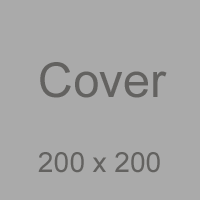
<style>
.page{position:relative;width:200px;height:200px;background:#aaaaaa}
.page>*{position:absolute;margin:0}
.t1{font:48px "ArialMT";color:#636260}
.t2{font:28px "ArialMT";color:#636260}
</style>
<div class="page">
<p class="t1" style="left:40px;top:62px;width:127px;height:36px">Cover</p>
<p class="t2" style="left:38px;top:152px;width:122px;height:21px">200 x 200</p>
</div>
